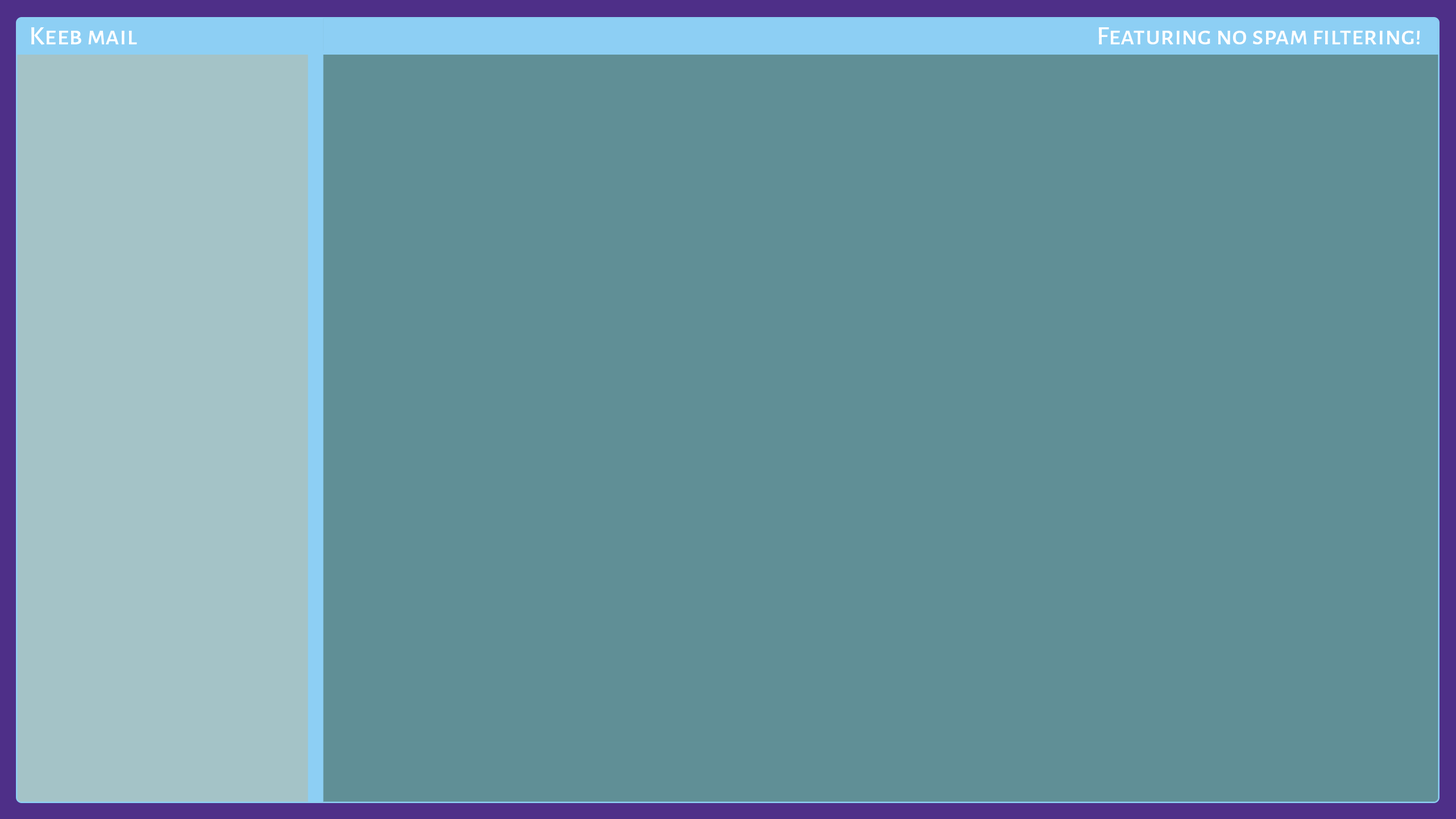
<style>
.page{position:relative;width:1456px;height:819px;background:#608f96}
.page>*{position:absolute;margin:0}
.t1{font:27.3px "AlegreyaSansSC-Medium";color:#ffffff}
</style>
<div class="page">
<p class="t1" style="left:31px;top:27px;width:106px;height:18px">Keeb mail</p>
<p class="t1" style="left:1099px;top:27px;width:321px;height:18px">Featuring no spam filtering!</p>
</div>
